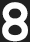
<style>
.page{position:relative;width:30px;height:42px;background:#212121}
.page>*{position:absolute;margin:0}
.t1{font:58.3px "CourierNewPS-BoldMT";color:#ffffff}
</style>
<div class="page">
<p class="t1" style="left:2px;top:2px;width:26px;height:40px">8</p>
</div>
